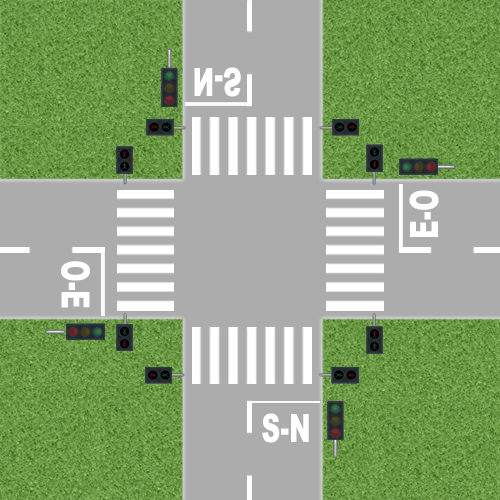
<style>
.page{position:relative;width:500px;height:500px;background:#acacac}
.page>*{position:absolute;margin:0}
.t1{font:39px "Arial-Black";color:#ffffff;scale:0.67 1}
</style>
<div class="page">
<p class="t1" style="left:194px;top:67px;width:47px;height:30px">N-S</p>
<p class="t1" style="left:409px;top:190px;width:30px;height:47px;rotate:-90deg">E-O</p>
<p class="t1" style="left:61px;top:261px;width:29px;height:47px;rotate:90deg">O-E</p>
<p class="t1" style="left:262px;top:413px;width:47px;height:30px">S-N</p>
</div>
